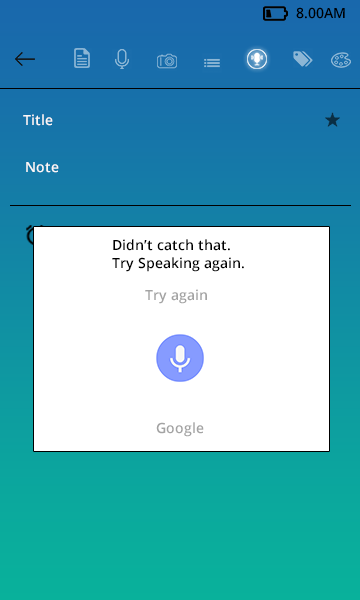
<style>
.page{position:relative;width:360px;height:600px;background:#ffffff}
.page>*{position:absolute;margin:0}
.t1{font:14px "OpenSans-Semibold";color:#000000}
.t2{font:14px "OpenSans-Semibold";color:#fbf8f8}
.t3{font:14px/6px "OpenSans-Semibold";color:#000000}
.t4{font:14px "OpenSans-Semibold";color:#a3a3a3}
</style>
<div class="page">
<p class="t1" style="left:296px;top:7px;width:49px;height:12px">8.00AM</p>
<p class="t2" style="left:23px;top:114px;width:30px;height:12px">Title</p>
<p class="t2" style="left:26px;top:162px;width:33px;height:11px">Note</p>
<p class="t3" style="left:112px;top:239px;width:132px;height:33px">Didn’t catch that.<br><br><br>Try Speaking again.</p>
<p class="t4" style="left:145px;top:289px;width:62px;height:15px">Try again</p>
<p class="t4" style="left:156px;top:422px;width:48px;height:15px">Google</p>
</div>
